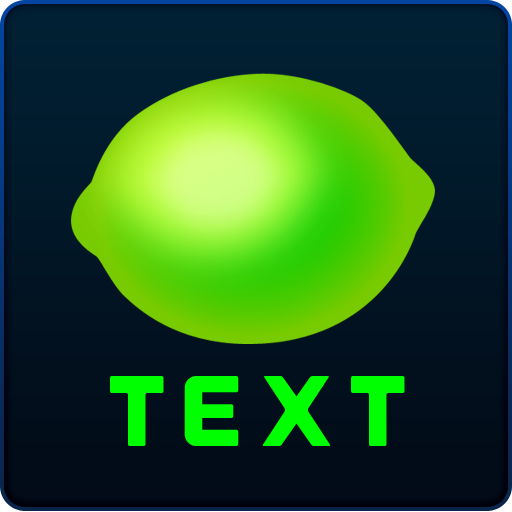
<style>
.page{position:relative;width:512px;height:512px}
.page>*{position:absolute;margin:0}
.t1{font:100px "Outage-Regular";letter-spacing:0.1em;color:#00ff00}
</style>
<div class="page">
<p class="t1" style="left:110px;top:376px;width:295px;height:70px">TEXT</p>
</div>
